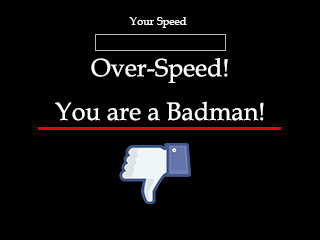
<style>
.page{position:relative;width:320px;height:240px;background:#000000}
.page>*{position:absolute;margin:0}
.t1{font:11px "BookAntiqua";color:#ffffff}
.t2{font:25px "BookAntiqua";color:#ffffff}
</style>
<div class="page">
<p class="t1" style="left:129px;top:17px;width:58px;height:11px">Your Speed</p>
<p class="t2" style="left:55px;top:58px;width:209px;height:63px;text-align:center">Over-Speed!<br>You are a Badman!</p>
</div>
